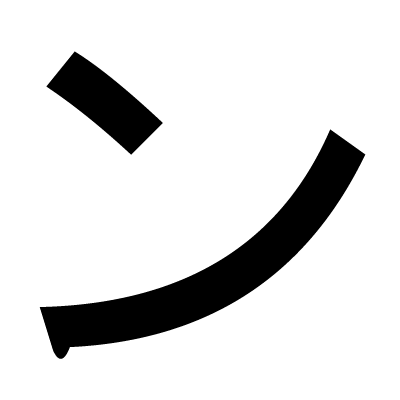
<style>
.page{position:relative;width:400px;height:400px;background:#ffffff}
.page>*{position:absolute;margin:0}
.t1{font:424.8px "MS-PGothic";color:#000000}
</style>
<div class="page">
<p class="t1" style="left:39px;top:51px;width:327px;height:308px">ン</p>
</div>
